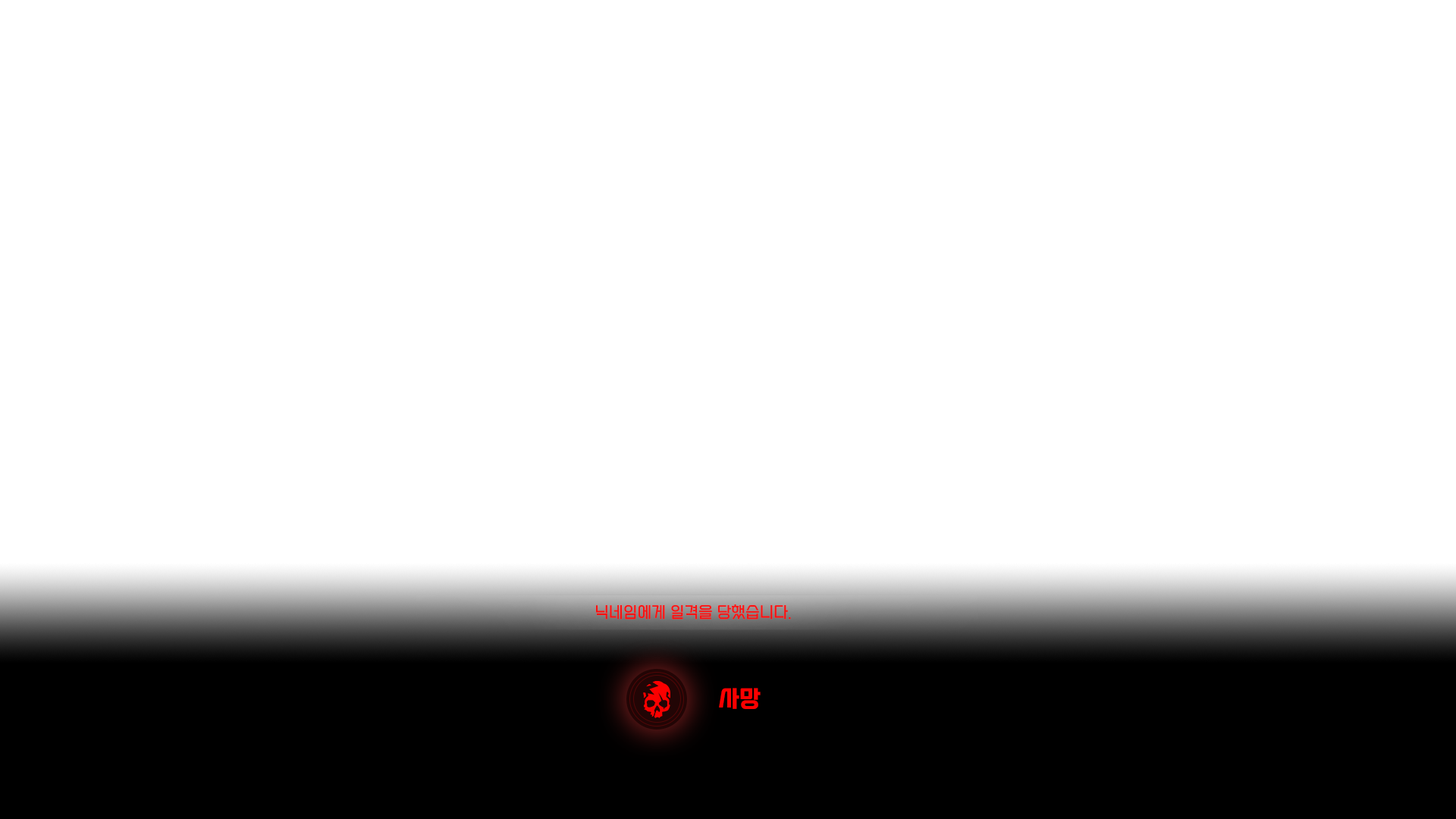
<style>
.page{position:relative;width:1456px;height:819px;background:#ffffff}
.page>*{position:absolute;margin:0}
.t1{font:15.2px "SEBANGGothic";letter-spacing:0.03em;color:#fb0000}
.t2{font:22.7px "SEBANGGothicBold";letter-spacing:0.03em;color:#fb0000}
</style>
<div class="page">
<p class="t1" style="left:595px;top:604px;width:196px;height:16px">닉네임에게 일격을 당했습니다.</p>
<p class="t2" style="left:719px;top:688px;width:42px;height:21px">사망</p>
</div>
